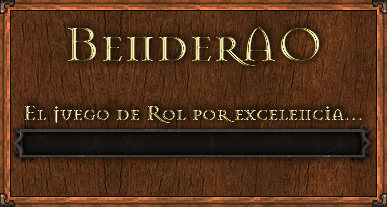
<style>
.page{position:relative;width:387px;height:207px}
.page>*{position:absolute;margin:0}
.t1{font:52.5px "Mason-Regular"}
.t2{font:22.4px "Mason-Regular"}
</style>
<div class="page">
<p class="t1" style="left:68px;top:27px;width:251px;height:39px">BenderAO</p>
<p class="t2" style="left:24px;top:106px;width:338px;height:18px">El juego de Rol por excelencia...</p>
</div>
